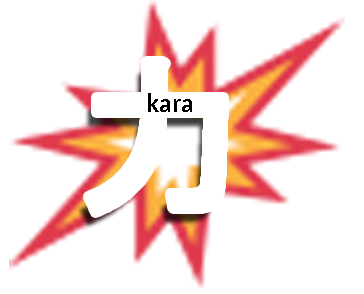
<style>
.page{position:relative;width:364px;height:294px;background:#ffffff}
.page>*{position:absolute;margin:0}
.t1{font:24px "Lato-Bold";color:#000000}
</style>
<div class="page">
<p class="t1" style="left:148px;top:93px;width:44px;height:19px">kara</p>
</div>
